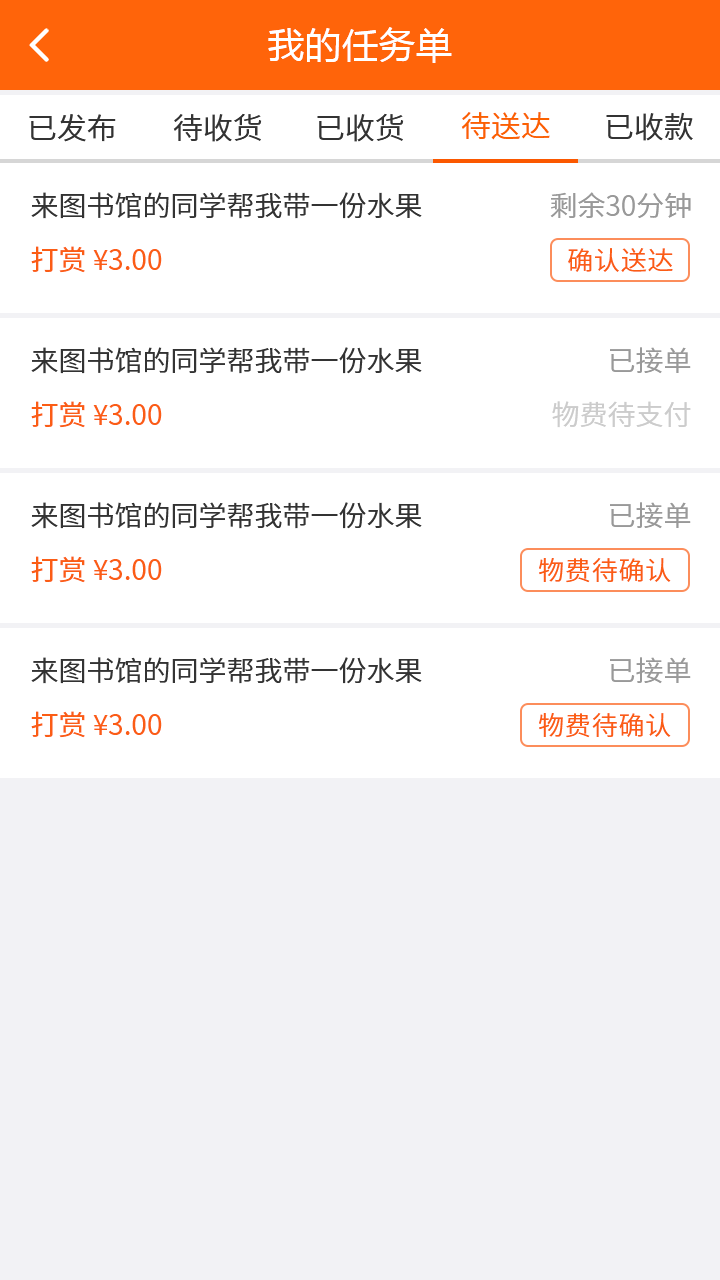
<style>
.page{position:relative;width:720px;height:1280px;background:#ffffff}
.page>*{position:absolute;margin:0}
.t1{font:36px "MicrosoftYaHei";letter-spacing:0.03em;color:#ffffff}
.t2{font:30px "NotoSansCJKsc-DemiLight";color:#333333;font-variant:small-caps}
.t3{font:30px "NotoSansCJKsc-DemiLight";color:#fb6100;font-variant:small-caps}
.t4{font:28px "NotoSansCJKsc-DemiLight";color:#333333;font-variant:small-caps}
.t5{font:28px "NotoSansCJKsc-DemiLight";color:#999999;font-variant:small-caps}
.t6{font:28px "NotoSansCJKsc-Regular";color:#fb5d15;font-variant:small-caps}
.t7{font:26px "NotoSansCJKsc-DemiLight";letter-spacing:0.03em;color:#fb5d15;font-variant:small-caps}
.t8{font:28px "NotoSansCJKsc-DemiLight";color:#cccccc;font-variant:small-caps}
</style>
<div class="page">
<p class="t1" style="left:268px;top:27px;width:184px;height:36px">我的任务单</p>
<p class="t2" style="left:173px;top:113px;width:89px;height:29px">待收货</p>
<p class="t2" style="left:317px;top:113px;width:87px;height:29px">已收货</p>
<p class="t3" style="left:461px;top:112px;width:89px;height:28px">待送达</p>
<p class="t2" style="left:606px;top:112px;width:87px;height:29px">已收款</p>
<p class="t2" style="left:29px;top:114px;width:87px;height:28px">已发布</p>
<p class="t4" style="left:31px;top:192px;width:391px;height:27px">来图书馆的同学帮我带一份水果</p>
<p class="t5" style="left:550px;top:192px;width:141px;height:26px">剩余30分钟</p>
<p class="t6" style="left:31px;top:246px;width:131px;height:27px">打赏 ¥3.00</p>
<p class="t7" style="left:568px;top:248px;width:105px;height:24px">确认送达</p>
<p class="t4" style="left:31px;top:347px;width:391px;height:27px">来图书馆的同学帮我带一份水果</p>
<p class="t5" style="left:610px;top:347px;width:81px;height:27px">已接单</p>
<p class="t6" style="left:31px;top:401px;width:131px;height:27px">打赏 ¥3.00</p>
<p class="t8" style="left:552px;top:401px;width:139px;height:27px">物费待支付</p>
<p class="t4" style="left:31px;top:502px;width:391px;height:27px">来图书馆的同学帮我带一份水果</p>
<p class="t5" style="left:610px;top:502px;width:81px;height:27px">已接单</p>
<p class="t6" style="left:31px;top:556px;width:131px;height:27px">打赏 ¥3.00</p>
<p class="t7" style="left:539px;top:558px;width:132px;height:25px">物费待确认</p>
<p class="t4" style="left:31px;top:657px;width:391px;height:27px">来图书馆的同学帮我带一份水果</p>
<p class="t5" style="left:610px;top:657px;width:81px;height:27px">已接单</p>
<p class="t6" style="left:31px;top:711px;width:131px;height:27px">打赏 ¥3.00</p>
<p class="t7" style="left:539px;top:713px;width:132px;height:25px">物费待确认</p>
</div>
